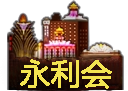
<style>
.page{position:relative;width:128px;height:91px;background:#ffffff}
.page>*{position:absolute;margin:0}
.t1{font:30px "MicrosoftYaHei";color:#f3e451;font-weight:bold}
</style>
<div class="page">
<p class="t1" style="left:20px;top:59px;width:92px;height:30px">永利会</p>
</div>
